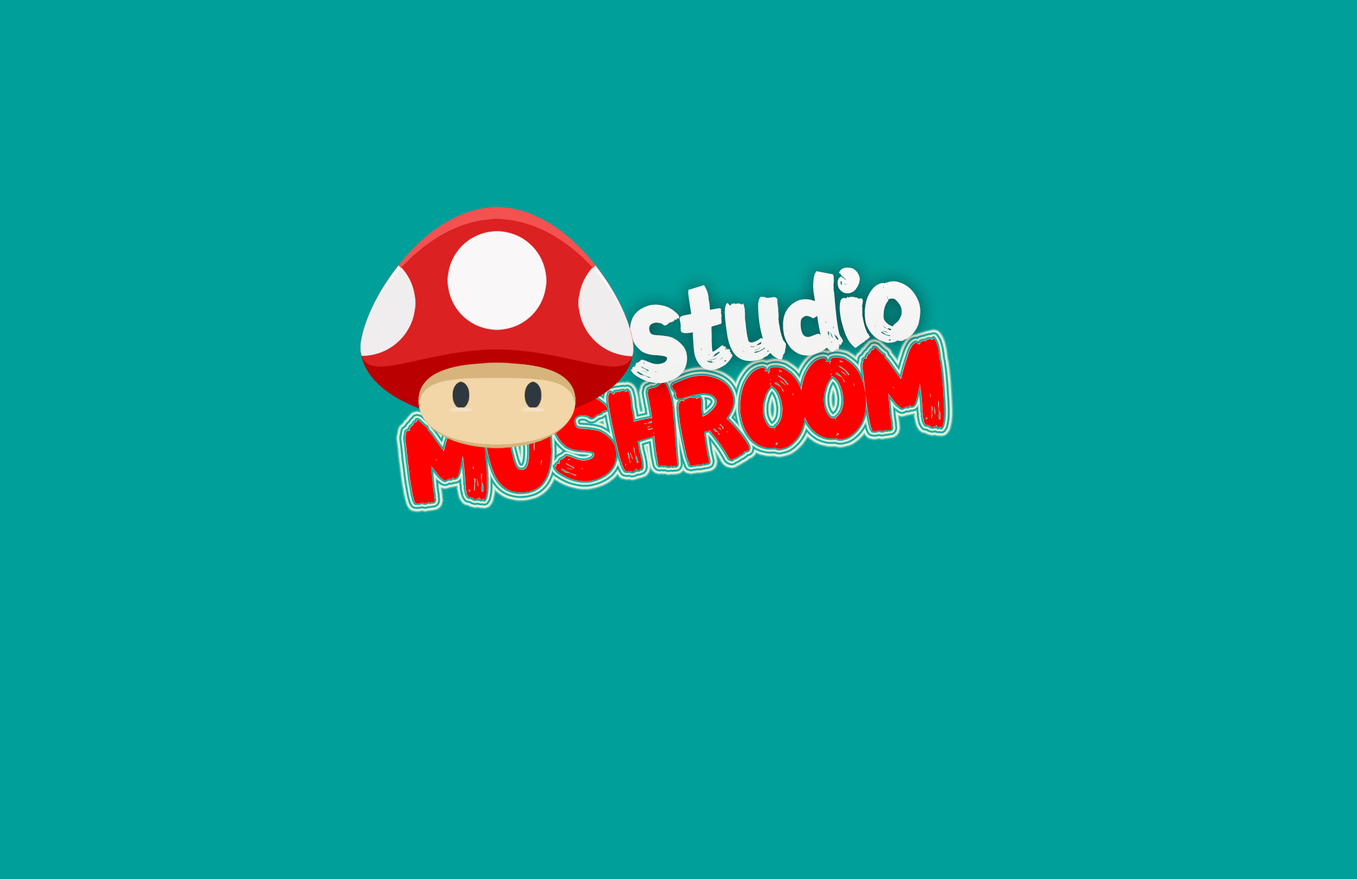
<style>
.page{position:relative;width:1357px;height:879px;background:#019f99}
.page>*{position:absolute;margin:0}
.t1{font:96.5px "FZFENSTXJW--GB1-0";letter-spacing:-0.08em;color:#ffffff}
.t2{font:105.9px "FZFENSTXJW--GB1-0";letter-spacing:-0.08em;color:#ff0000}
</style>
<div class="page">
<p class="t1" style="left:630px;top:267px;width:290px;height:117px;rotate:-9deg">Studio</p>
<p class="t2" style="left:405px;top:338px;width:539px;height:166px;rotate:-9deg">MUSHROOM</p>
</div>
